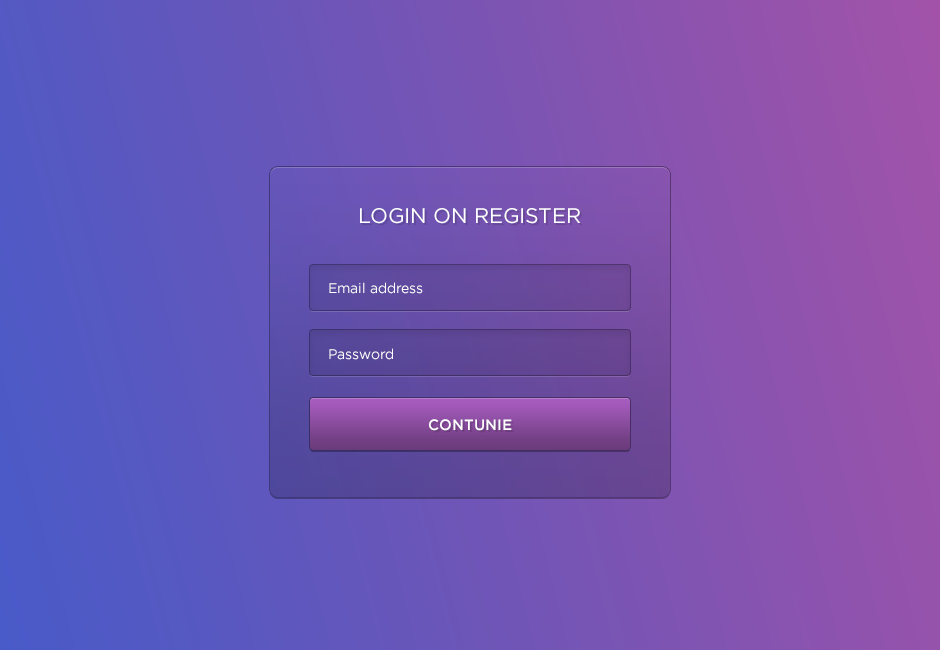
<style>
.page{position:relative;width:940px;height:650px}
.page>*{position:absolute;margin:0}
.t1{font:21px "GothamPro";color:#ffffff;text-transform:uppercase}
.t2{font:14px "GothamPro";color:#ffffff}
.t3{font:15px "GothamPro-Medium";color:#ffffff;text-transform:uppercase}
</style>
<div class="page">
<p class="t1" style="left:360px;top:208px;width:221px;height:16px">Login on register</p>
<p class="t2" style="left:329px;top:282px;width:94px;height:12px">Email address</p>
<p class="t2" style="left:329px;top:348px;width:64px;height:12px">Password</p>
<p class="t3" style="left:429px;top:419px;width:83px;height:12px">contunie</p>
</div>
